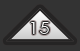
<style>
.page{position:relative;width:80px;height:51px;background:#333333}
.page>*{position:absolute;margin:0}
.t1{font:16.9px "CenturyGothic";letter-spacing:0.02em;color:#f1eeec;scale:1.15 1}
</style>
<div class="page">
<p class="t1" style="left:31px;top:22px;width:4px;height:12px">1</p>
<p class="t1" style="left:31px;top:22px;width:4px;height:12px">1</p>
<p class="t1" style="left:31px;top:22px;width:4px;height:12px">1</p>
<p class="t1" style="left:40px;top:22px;width:9px;height:12px">5</p>
<p class="t1" style="left:40px;top:22px;width:9px;height:12px">5</p>
<p class="t1" style="left:40px;top:22px;width:9px;height:12px">5</p>
</div>
